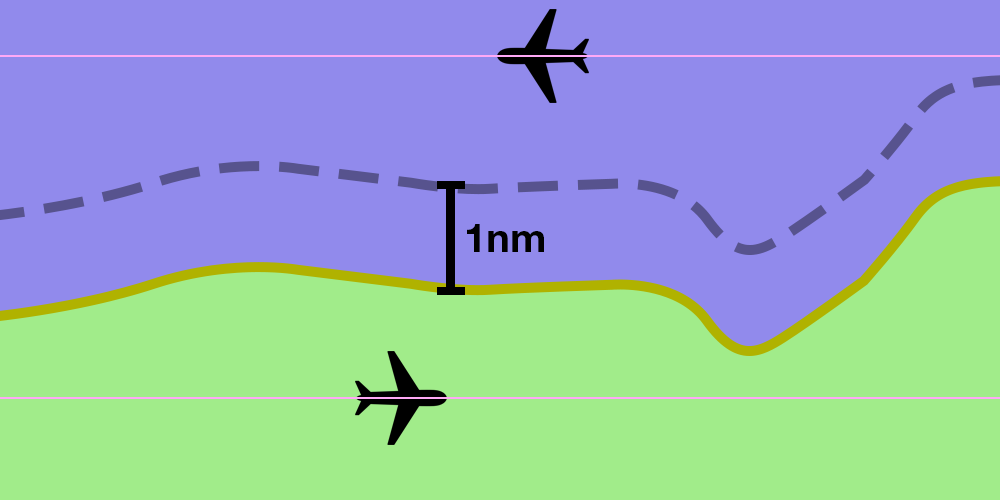
<style>
.page{position:relative;width:1000px;height:500px;background:#918aec}
.page>*{position:absolute;margin:0}
.t1{font:40px "HelveticaNeueLTStd-Bd";color:#000000}
</style>
<div class="page">
<p class="t1" style="left:467px;top:224px;width:77px;height:28px">1nm</p>
</div>
